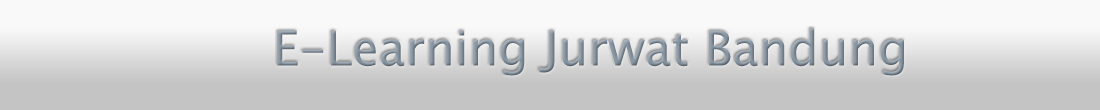
<style>
.page{position:relative;width:1100px;height:110px;background:#f9f9f9}
.page>*{position:absolute;margin:0}
.t1{font:48px "LucidaSansUnicode"}
</style>
<div class="page">
<p class="t1" style="left:277px;top:28px;width:627px;height:48px">E-Learning Jurwat Bandung</p>
</div>
